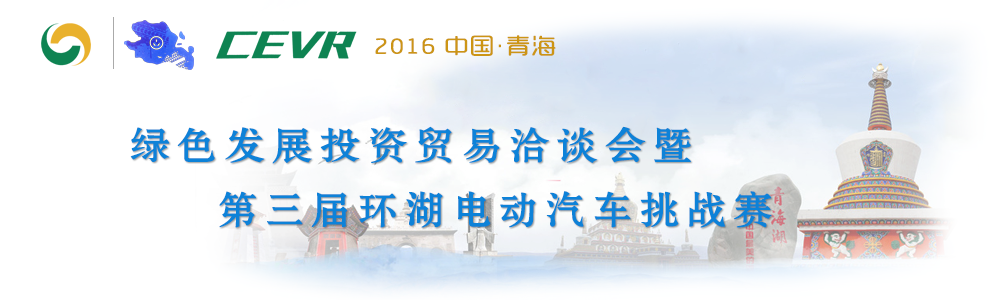
<style>
.page{position:relative;width:1000px;height:300px;background:#ffffff}
.page>*{position:absolute;margin:0}
.t1{font:22.3px "MFYueYuan_Noncommercial-Regular";color:#cd9616;font-weight:bold;scale:1.12 1}
.t2{font:37.2px "FZSHJW--GB1-0";letter-spacing:0.117em;color:#0d82d8;font-weight:bold;scale:1.12 1}
.t3{font:37.5px "FZSHJW--GB1-0";letter-spacing:0.133em;color:#0d82d8;font-weight:bold;scale:1.08 1}
</style>
<div class="page">
<p class="t1" style="left:375px;top:35px;width:181px;height:21px">2016 中国·青海</p>
<p class="t2" style="left:130px;top:126px;width:561px;height:38px">绿色发展投资贸易洽谈会暨</p>
<p class="t3" style="left:219px;top:191px;width:553px;height:37px">第三届环湖电动汽车挑战赛</p>
</div>
